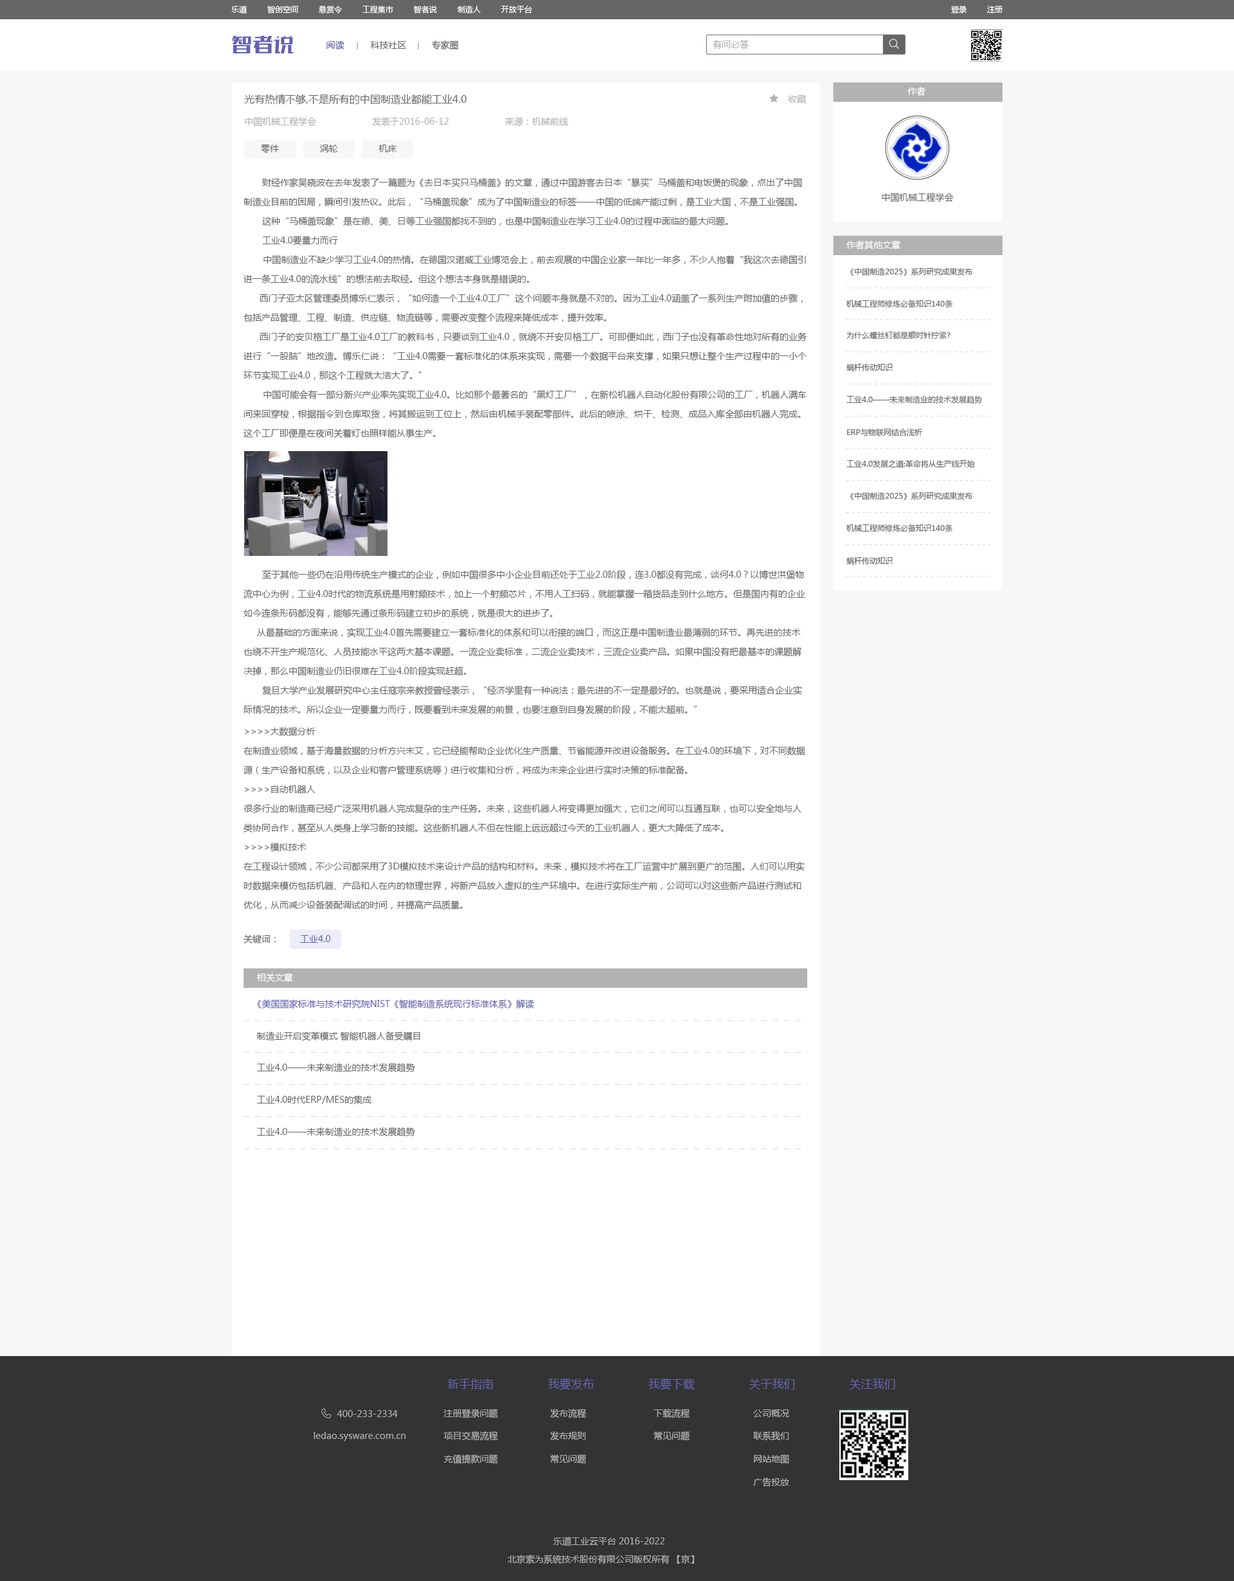
<style>
.page{position:relative;width:1234px;height:1581px;background:#f7f7f7}
.page>*{position:absolute;margin:0}
.t1{font:7.7px "MicrosoftYaHei";color:#ffffff}
.t2{font:19.3px "FZSKJW--GB1-0";color:#6663ab;scale:1.08 1}
.t3{font:9px "MicrosoftYaHei";color:#6663ab}
.t4{font:9px "MicrosoftYaHei";color:#666666}
.t5{font:9px "MicrosoftYaHei";color:#b2b2b2}
.t6{font:9px "MicrosoftYaHei";color:#ffffff}
.t7{font:10.3px "MicrosoftYaHei";color:#666666}
.t8{font:9px/19.3px "MicrosoftYaHei";color:#666666}
.t9{font:7.7px "MicrosoftYaHei";color:#666666}
.t10{font:11.6px "MicrosoftYaHei";color:#6663ab}
</style>
<div class="page">
<p class="t1" style="left:231px;top:5px;width:301px;height:9px">乐道         智创空间         悬赏令         工程集市         智者说         制造人         开放平台</p>
<p class="t1" style="left:951px;top:6px;width:52px;height:8px">登录         注册</p>
<p class="t2" style="left:232px;top:35px;width:62px;height:18px">智者说</p>
<p class="t3" style="left:327px;top:40px;width:18px;height:10px">阅读</p>
<p class="t4" style="left:370px;top:41px;width:36px;height:8px">科技社区</p>
<p class="t4" style="left:431px;top:40px;width:27px;height:10px">专家圈</p>
<p class="t5" style="left:713px;top:40px;width:36px;height:10px">有问必答</p>
<p class="t6" style="left:908px;top:87px;width:18px;height:9px">作者</p>
<p class="t7" style="left:244px;top:94px;width:223px;height:11px">光有热情不够,不是所有的中国制造业都能工业4.0</p>
<p class="t5" style="left:788px;top:94px;width:19px;height:10px">收藏</p>
<p class="t5" style="left:245px;top:117px;width:323px;height:10px">中国机械工程学会                     发表于2016-06-12                     来源：机械前线</p>
<p class="t4" style="left:261px;top:144px;width:18px;height:10px">零件</p>
<p class="t4" style="left:320px;top:145px;width:18px;height:7px">涡轮</p>
<p class="t4" style="left:379px;top:145px;width:18px;height:7px">机床</p>
<p class="t8" style="left:244px;top:178px;width:563px;height:260px;text-align:justify">财经作家吴晓波在去年发表了一篇题为《去日本买只马桶盖》的文章，通过中国游客去日本“暴买”马桶盖和电饭煲的现象，点出了中国<br>制造业目前的困局，瞬间引发热议。此后，“马桶盖现象”成为了中国制造业的标签——中国的低端产能过剩，是工业大国，不是工业强国。<br>       这种“马桶盖现象”是在德、美、日等工业强国都找不到的，也是中国制造业在学习工业4.0的过程中面临的最大问题。<br>       工业4.0要量力而行<br>       中国制造业不缺少学习工业4.0的热情。在德国汉诺威工业博览会上，前去观展的中国企业家一年比一年多，不少人抱着“我这次去德国引进一条工业4.0的流水线”的想法前去取经。但这个想法本身就是错误的。<br>       西门子亚太区管理委员博乐仁表示，“如何造一个工业4.0工厂”这个问题本身就是不对的。因为工业4.0涵盖了一系列生产附加值的步骤，包括产品管理、工程、制造、供应链、物流链等，需要改变整个流程来降低成本，提升效率。<br>       西门子的安贝格工厂是工业4.0工厂的教科书，只要谈到工业4.0，就绕不开安贝格工厂。可即便如此，西门子也没有革命性地对所有的业务进行“一股脑”地改造。博乐仁说：“工业4.0需要一套标准化的体系来实现，需要一个数据平台来支撑，如果只想让整个生产过程中的一小个环节实现工业4.0，那这个工程就太浩大了。”<br>       中国可能会有一部分新兴产业率先实现工业4.0。比如那个最著名的“黑灯工厂”，在新松机器人自动化股份有限公司的工厂，机器人满车间来回穿梭，根据指令到仓库取货，将其搬运到工位上，然后由机械手装配零部件。此后的喷涂、烘干、检测、成品入库全部由机器人完成。这个工厂即便是在夜间关着灯也照样能从事生产。</p>
<p class="t4" style="left:882px;top:193px;width:72px;height:10px">中国机械工程学会</p>
<p class="t6" style="left:847px;top:240px;width:54px;height:10px">作者其他文章</p>
<p class="t9" style="left:850px;top:267px;width:123px;height:9px">《中国制造2025》系列研究成果发布</p>
<p class="t9" style="left:847px;top:300px;width:106px;height:8px">机械工程师修炼必备知识140条</p>
<p class="t9" style="left:847px;top:331px;width:104px;height:8px">为什么螺丝钉都是顺时针拧紧?</p>
<p class="t9" style="left:847px;top:363px;width:46px;height:9px">蜗杆传动知识</p>
<p class="t9" style="left:847px;top:395px;width:135px;height:9px">工业4.0——未来制造业的技术发展趋势</p>
<p class="t9" style="left:847px;top:428px;width:76px;height:9px">ERP与物联网结合浅析</p>
<p class="t9" style="left:847px;top:460px;width:128px;height:8px">工业4.0发展之道:革命将从生产线开始</p>
<p class="t9" style="left:850px;top:492px;width:123px;height:8px">《中国制造2025》系列研究成果发布</p>
<p class="t9" style="left:847px;top:524px;width:106px;height:8px">机械工程师修炼必备知识140条</p>
<p class="t9" style="left:847px;top:557px;width:46px;height:8px">蜗杆传动知识</p>
<p class="t8" style="left:244px;top:570px;width:562px;height:145px">至于其他一些仍在沿用传统生产模式的企业，例如中国很多中小企业目前还处于工业2.0阶段，连3.0都没有完成，谈何4.0？以博世洪堡物流中心为例，工业4.0时代的物流系统是用射频技术，加上一个射频芯片，不用人工扫码，就能掌握一箱货品走到什么地方。但是国内有的企业如今连条形码都没有，能够先通过条形码建立初步的系统，就是很大的进步了。<br>     从最基础的方面来说，实现工业4.0首先需要建立一套标准化的体系和可以衔接的端口，而这正是中国制造业最薄弱的环节。再先进的技术也绕不开生产规范化、人员技能水平这两大基本课题。一流企业卖标准，二流企业卖技术，三流企业卖产品。如果中国没有把最基本的课题解决掉，那么中国制造业仍旧很难在工业4.0阶段实现赶超。<br>       复旦大学产业发展研究中心主任寇宗来教授曾经表示，“经济学里有一种说法：最先进的不一定是最好的。也就是说，要采用适合企业实际情况的技术。所以企业一定要量力而行，既要看到未来发展的前景，也要注意到自身发展的阶段，不能太超前。”</p>
<p class="t8" style="left:244px;top:727px;width:562px;height:183px">&gt;&gt;&gt;&gt;大数据分析<br>在制造业领域，基于海量数据的分析方兴未艾，它已经能帮助企业优化生产质量、节省能源并改进设备服务。在工业4.0的环境下，对不同数据源（生产设备和系统，以及企业和客户管理系统等）进行收集和分析，将成为未来企业进行实时决策的标准配备。<br>&gt;&gt;&gt;&gt;自动机器人<br>很多行业的制造商已经广泛采用机器人完成复杂的生产任务。未来，这些机器人将变得更加强大，它们之间可以互通互联，也可以安全地与人类协同合作，甚至从人类身上学习新的技能。这些新机器人不但在性能上远远超过今天的工业机器人，更大大降低了成本。<br>&gt;&gt;&gt;&gt;模拟技术<br>在工程设计领域，不少公司都采用了3D模拟技术来设计产品的结构和材料。未来，模拟技术将在工厂运营中扩展到更广的范围。人们可以用实时数据来模仿包括机器、产品和人在内的物理世界，将新产品放入虚拟的生产环境中。在进行实际生产前，公司可以对这些新产品进行测试和优化，从而减少设备装配调试的时间，并提高产品质量。</p>
<p class="t4" style="left:244px;top:935px;width:32px;height:9px">关键词：</p>
<p class="t3" style="left:300px;top:935px;width:30px;height:8px">工业4.0</p>
<p class="t6" style="left:256px;top:973px;width:37px;height:10px">相关文章</p>
<p class="t3" style="left:257px;top:1000px;width:277px;height:9px">《美国国家标准与技术研究院NIST《智能制造系统现行标准体系》解读</p>
<p class="t4" style="left:256px;top:1032px;width:164px;height:9px">制造业开启变革模式 智能机器人备受瞩目</p>
<p class="t4" style="left:256px;top:1063px;width:159px;height:10px">工业4.0——未来制造业的技术发展趋势</p>
<p class="t4" style="left:256px;top:1095px;width:116px;height:10px">工业4.0时代ERP/MES的集成</p>
<p class="t4" style="left:256px;top:1128px;width:159px;height:9px">工业4.0——未来制造业的技术发展趋势</p>
<p class="t10" style="left:447px;top:1379px;width:47px;height:11px">新手指南</p>
<p class="t10" style="left:548px;top:1378px;width:47px;height:12px">我要发布</p>
<p class="t10" style="left:648px;top:1379px;width:47px;height:11px">我要下载</p>
<p class="t10" style="left:749px;top:1379px;width:46px;height:11px">关于我们</p>
<p class="t10" style="left:849px;top:1379px;width:47px;height:11px">关注我们</p>
<p class="t5" style="left:444px;top:1409px;width:54px;height:9px">注册登录问题</p>
<p class="t5" style="left:550px;top:1409px;width:36px;height:10px">发布流程</p>
<p class="t5" style="left:654px;top:1409px;width:36px;height:10px">下载流程</p>
<p class="t5" style="left:753px;top:1410px;width:36px;height:8px">公司概况</p>
<p class="t5" style="left:337px;top:1410px;width:61px;height:8px">400-233-2334</p>
<p class="t5" style="left:314px;top:1432px;width:92px;height:9px">ledao.sysware.com.cn</p>
<p class="t5" style="left:444px;top:1432px;width:54px;height:9px">项目交易流程</p>
<p class="t5" style="left:550px;top:1432px;width:36px;height:9px">发布规则</p>
<p class="t5" style="left:654px;top:1432px;width:36px;height:9px">常见问题</p>
<p class="t5" style="left:753px;top:1432px;width:36px;height:9px">联系我们</p>
<p class="t5" style="left:444px;top:1455px;width:54px;height:9px">充值提款问题</p>
<p class="t5" style="left:550px;top:1455px;width:36px;height:9px">常见问题</p>
<p class="t5" style="left:754px;top:1455px;width:35px;height:9px">网站地图</p>
<p class="t5" style="left:753px;top:1478px;width:36px;height:9px">广告投放</p>
<p class="t5" style="left:554px;top:1537px;width:111px;height:9px">乐道工业云平台 2016-2022</p>
<p class="t5" style="left:508px;top:1555px;width:186px;height:10px">北京索为系统技术股份有限公司版权所有 【京】</p>
</div>
